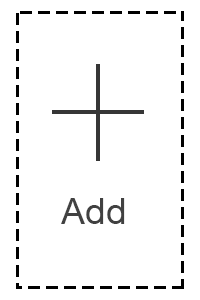
<style>
.page{position:relative;width:200px;height:300px;background:#ffffff}
.page>*{position:absolute;margin:0}
.t1{font:36px "ArialNova";color:#414141}
</style>
<div class="page">
<p class="t1" style="left:61px;top:198px;width:64px;height:26px">Add</p>
</div>
